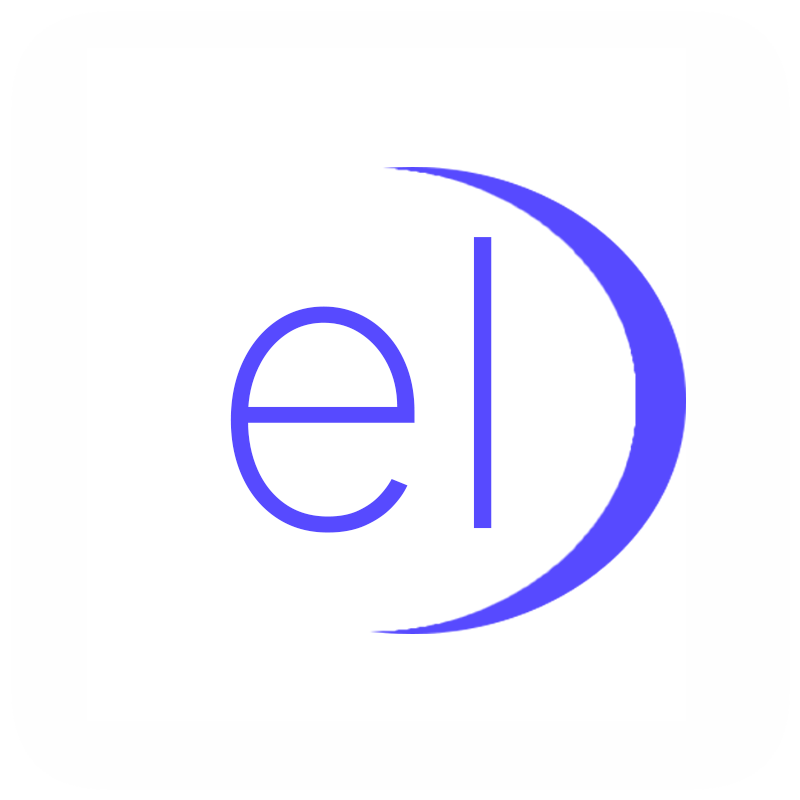
<style>
.page{position:relative;width:800px;height:800px;background:#ffffff}
.page>*{position:absolute;margin:0}
.t1{font:400px "Inter-ExtraLight";color:#574aff}
</style>
<div class="page">
<p class="t1" style="left:230px;top:237px;width:262px;height:296px">el</p>
</div>
